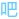
<style>
.page{position:relative;width:19px;height:19px;background:#ffffff}
.page>*{position:absolute;margin:0}
.t1{font:18px "HiraginoSansGB-W3";color:#66ccff}
</style>
<div class="page">
<p class="t1" style="left:1px;top:1px;width:17px;height:16px">吧</p>
</div>
